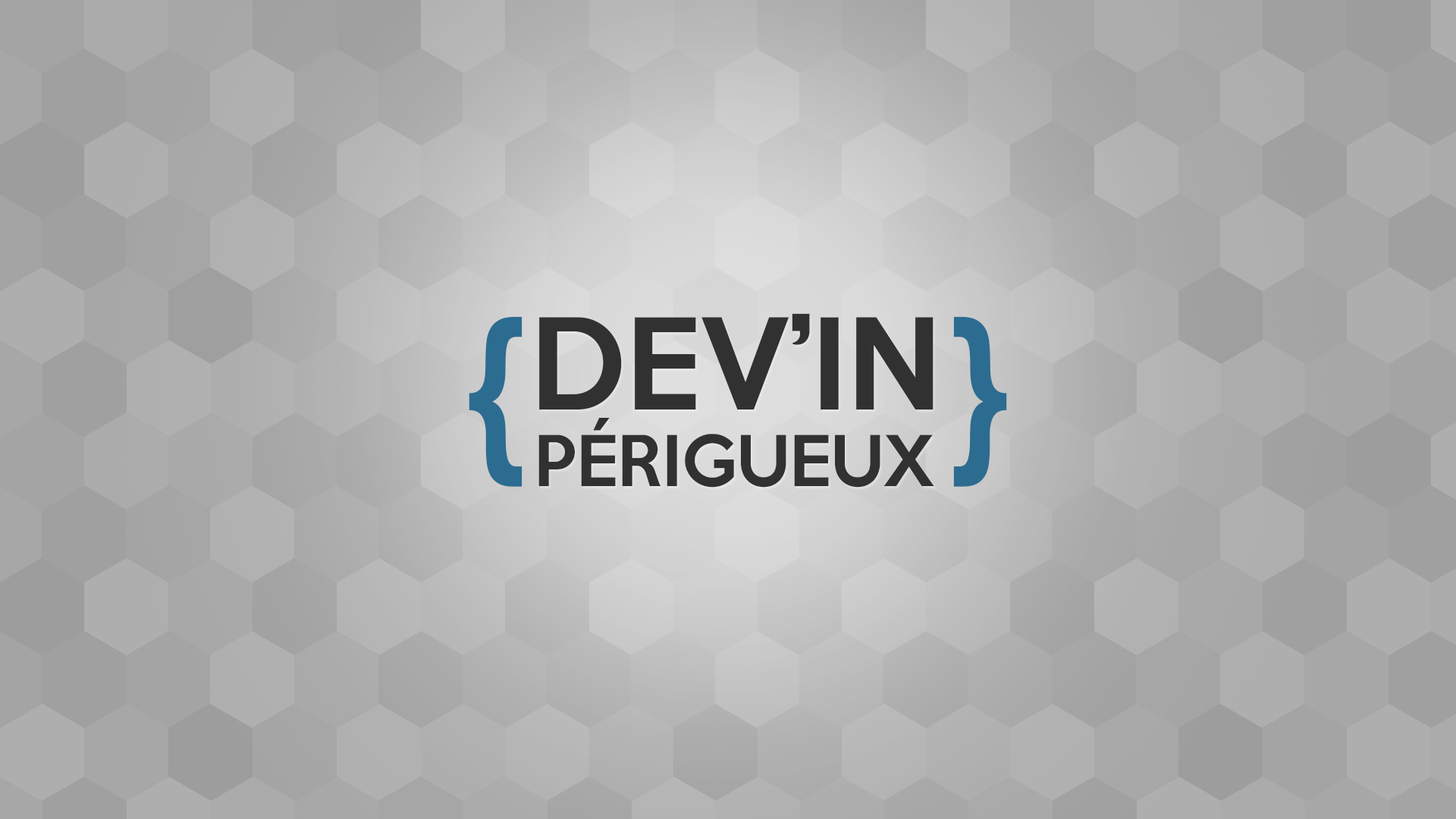
<style>
.page{position:relative;width:1456px;height:819px}
.page>*{position:absolute;margin:0}
.t1{font:150.3px "KeepCalm-Medium";color:#2c6c91}
.t2{font:115px "KeepCalm-Medium";color:#313131}
.t3{font:64.1px "KeepCalm-Medium";color:#313131;text-transform:uppercase}
</style>
<div class="page">
<p class="t1" style="left:469px;top:316px;width:53px;height:171px">{</p>
<p class="t2" style="left:539px;top:313px;width:394px;height:96px">DEV’IN</p>
<p class="t1" style="left:953px;top:316px;width:54px;height:171px">}</p>
<p class="t3" style="left:538px;top:418px;width:396px;height:70px">Périgueux</p>
</div>
